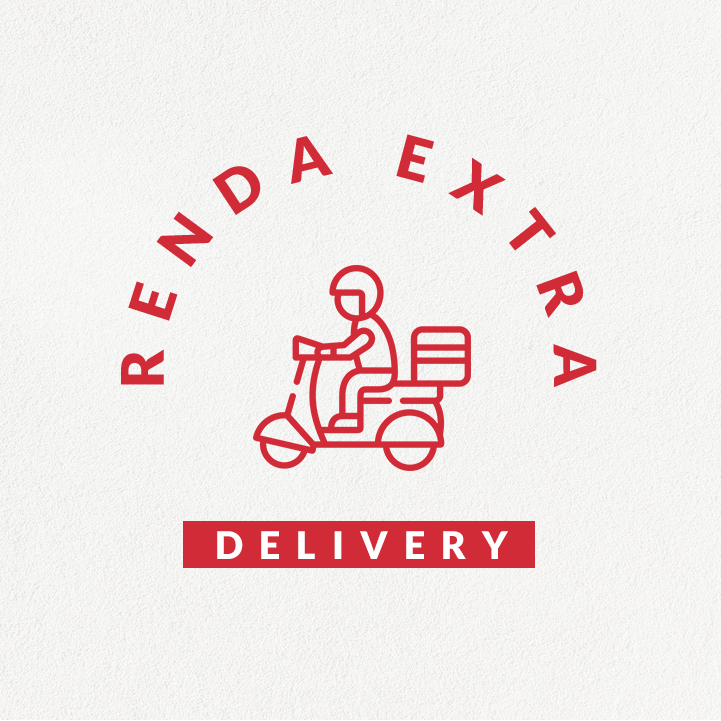
<style>
.page{position:relative;width:721px;height:721px}
.page>*{position:absolute;margin:0}
.t1{font:58.6px "Lato-Black";letter-spacing:0.42em;color:#d02b37;text-transform:uppercase}
.t2{font:37.9px "Lato-Black";letter-spacing:0.42em;color:#ffffff;text-transform:uppercase}
</style>
<div class="page">
<p class="t1" style="left:121px;top:134px;width:476px;height:254px;rotate:1deg">renda extra</p>
<p class="t2" style="left:217px;top:531px;width:291px;height:28px">delivery</p>
</div>
